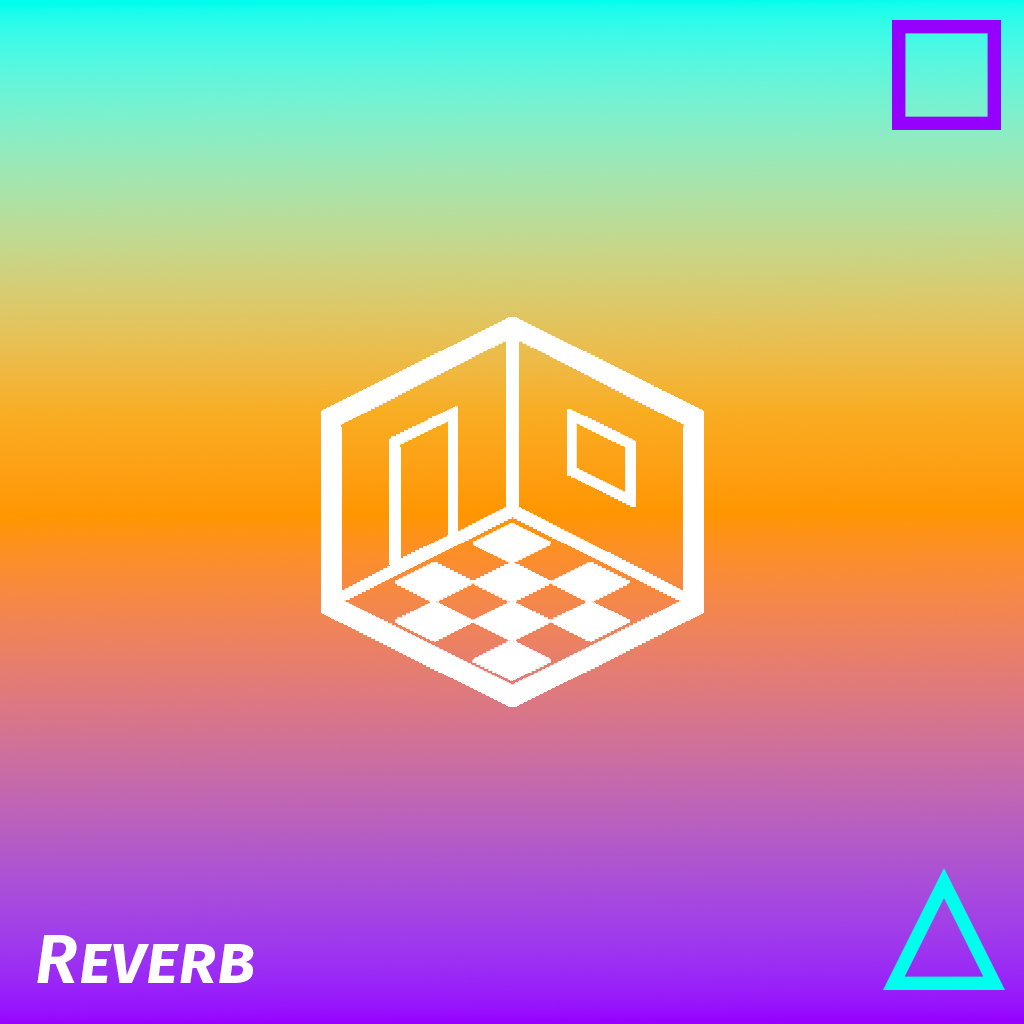
<style>
.page{position:relative;width:1024px;height:1024px}
.page>*{position:absolute;margin:0}
.t1{font:70px "FiraSans-SemiBoldItalic";color:#fffefe;font-variant:small-caps}
</style>
<div class="page">
<p class="t1" style="left:37px;top:935px;width:217px;height:48px">Reverb</p>
</div>
